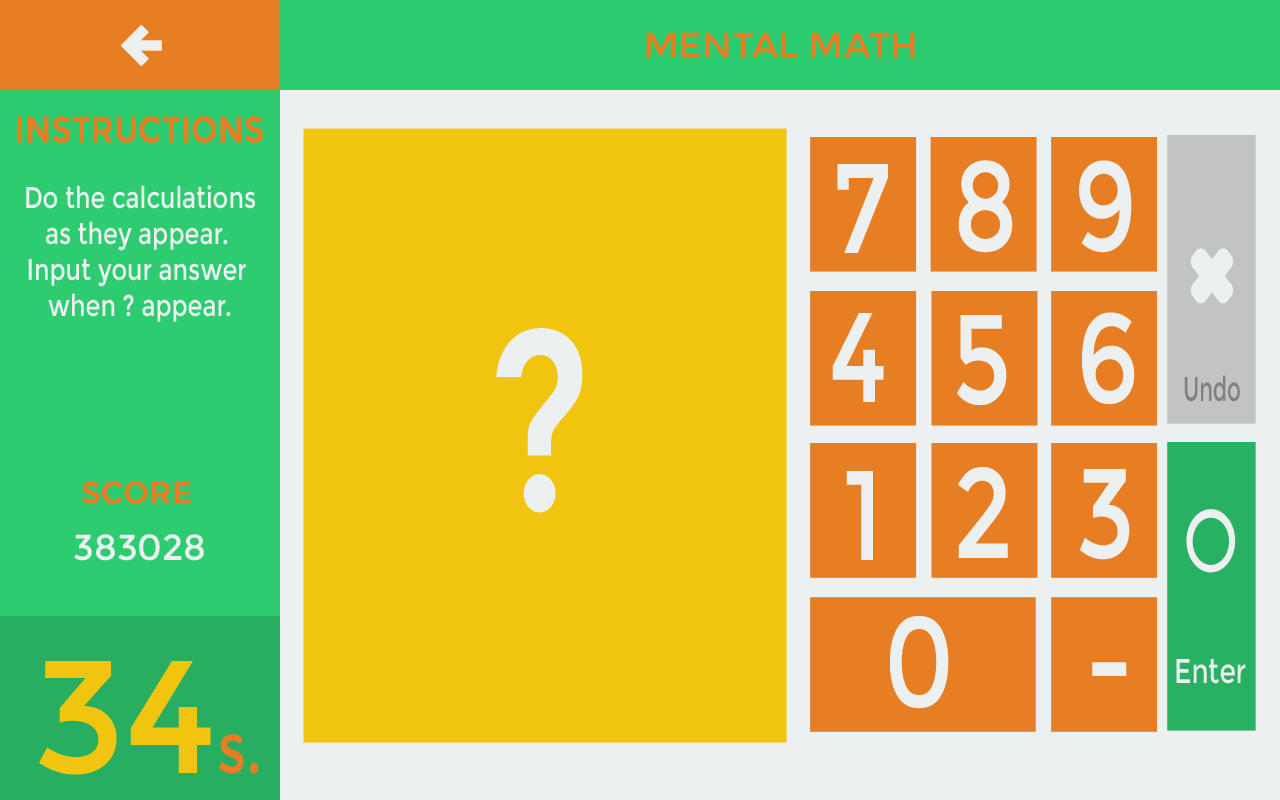
<style>
.page{position:relative;width:1280px;height:800px;background:#f1c40f}
.page>*{position:absolute;margin:0}
.t1{font:36px "Montserrat-Regular";color:#e77e23}
.t2{font:36px "Montserrat-Regular";color:#e77e23;text-transform:uppercase;font-weight:bold;scale:0.85 1}
.t3{font:127.4px "Montserrat-Regular";color:#ecf0f1;scale:0.8 1}
.t4{font:30px "Montserrat-Regular";color:#ecf0f1;scale:0.8 1}
.t5{font:256px "Montserrat-Regular";color:#ecf0f1;scale:0.8 1}
.t6{font:34.4px "Montserrat-Regular";color:#7f8182;scale:0.62 1}
.t7{font:30px "Montserrat-Regular";color:#e77e23;font-weight:bold}
.t8{font:36px "Montserrat-Regular";color:#ecf0f1}
.t9{font:160px "Montserrat-Regular";color:#f1c40f}
.t10{font:34.4px "Montserrat-Regular";color:#ecf0f1;scale:0.77 1}
.t11{font:72px "Montserrat-Regular";color:#e77e23;scale:0.8 1}
</style>
<div class="page">
<p class="t1" style="left:646px;top:32px;width:269px;height:26px">MENTAL MATH</p>
<p class="t2" style="left:17px;top:116px;width:246px;height:27px">Instructions</p>
<p class="t3" style="left:958px;top:160px;width:55px;height:93px">8</p>
<p class="t3" style="left:1079px;top:160px;width:53px;height:93px">9</p>
<p class="t3" style="left:837px;top:164px;width:51px;height:89px">7</p>
<p class="t4" style="left:26px;top:185px;width:229px;height:137px;text-align:center">Do the calculations<br>as they appear. <br>Input your answer <br>when ? appear.</p>
<p class="t3" style="left:832px;top:313px;width:52px;height:89px">4</p>
<p class="t3" style="left:957px;top:315px;width:50px;height:91px">5</p>
<p class="t3" style="left:1082px;top:312px;width:53px;height:93px">6</p>
<p class="t5" style="left:496px;top:328px;width:87px;height:185px">?</p>
<p class="t6" style="left:1184px;top:375px;width:56px;height:27px">Undo</p>
<p class="t3" style="left:846px;top:471px;width:27px;height:89px">1</p>
<p class="t3" style="left:958px;top:467px;width:50px;height:91px">2</p>
<p class="t3" style="left:1079px;top:469px;width:51px;height:91px">3</p>
<p class="t7" style="left:82px;top:481px;width:109px;height:23px">SCORE</p>
<p class="t8" style="left:74px;top:534px;width:130px;height:27px">383028</p>
<p class="t3" style="left:890px;top:616px;width:59px;height:93px">0</p>
<p class="t9" style="left:39px;top:661px;width:172px;height:114px">34</p>
<p class="t3" style="left:1092px;top:662px;width:35px;height:14px">-</p>
<p class="t10" style="left:1176px;top:659px;width:70px;height:25px">Enter</p>
<p class="t11" style="left:219px;top:734px;width:40px;height:40px">s.</p>
</div>
